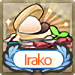
<style>
.page{position:relative;width:75px;height:75px}
.page>*{position:absolute;margin:0}
.t1{font:16px "AdobeClean-Regular";letter-spacing:-0.08em;color:#ff5a00}
</style>
<div class="page">
<p class="t1" style="left:24px;top:53px;width:28px;height:13px">Irako</p>
</div>
